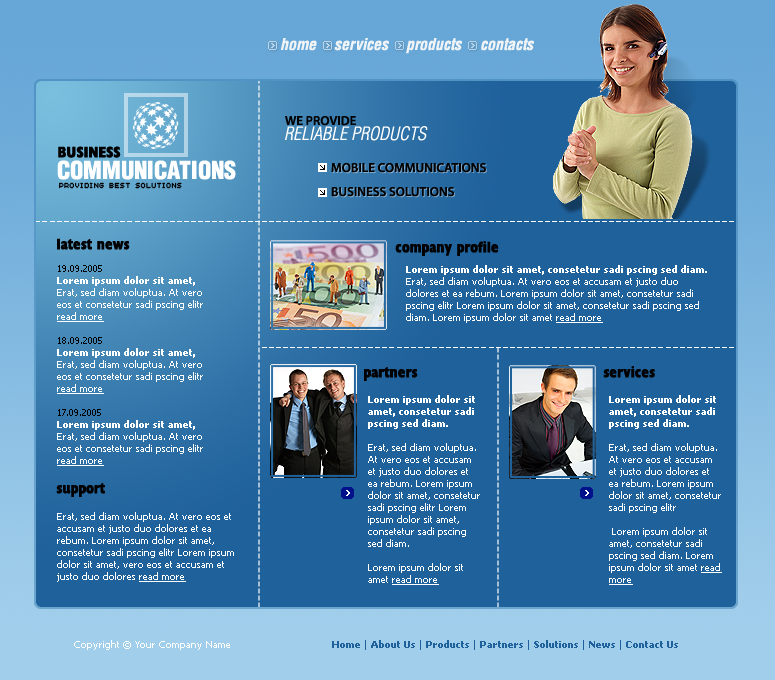
<style>
.page{position:relative;width:775px;height:680px;background:#1f619b}
.page>*{position:absolute;margin:0}
.t1{font:16px "Helvetica-Condensed-BoldObl";color:#f0f4f7}
.t2{font:18px "Helvetica-Condensed-LightObl";color:#ffffff}
.t3{font:13px "MyriadPro-Semibold";color:#000000;text-transform:uppercase}
.t4{font:15.5px "Humanist521BT-XtraBoldCondensed";color:#000000;text-transform:uppercase}
.t5{font:24px "Helvetica-Condensed-Black";color:#ffffff}
.t6{font:13px/24px "MyriadPro-Semibold";color:#000000;text-transform:uppercase}
.t7{font:9.7px "AuXDotBitC";color:#000000;scale:0.83 1}
.t8{font:15.5px "Humanist521BT-XtraBoldCondensed";color:#000000}
.t9{font:10px "Tahoma";color:#ffffff}
.t10{font:10px "Tahoma";color:#000000}
.t11{font:10px "Tahoma-Bold";color:#ffffff}
.t12{font:10px "Tahoma";color:#ffffff;text-decoration:underline}
.t13{font:10px "Tahoma-Bold";color:#1f619b}
.t14{font:10px "Tahoma";color:#1f619b}
</style>
<div class="page">
<p class="t1" style="left:280px;top:38px;width:37px;height:13px">home</p>
<p class="t1" style="left:334px;top:38px;width:55px;height:13px">services</p>
<p class="t1" style="left:406px;top:38px;width:56px;height:16px">products</p>
<p class="t1" style="left:481px;top:38px;width:53px;height:13px">contacts</p>
<p class="t2" style="left:285px;top:126px;width:143px;height:15px">RELIABLE PRODUCTS</p>
<p class="t3" style="left:285px;top:116px;width:71px;height:10px">we provide</p>
<p class="t4" style="left:58px;top:146px;width:63px;height:12px">BUSINESS</p>
<p class="t5" style="left:57px;top:160px;width:179px;height:20px">COMMUNICATIONS</p>
<p class="t6" style="left:331px;top:163px;width:155px;height:34px">mobile communications<br>business solutions</p>
<p class="t7" style="left:59px;top:182px;width:123px;height:7px">PROVIDING BEST SOLUTIONS</p>
<p class="t8" style="left:57px;top:238px;width:73px;height:12px">latest news</p>
<p class="t8" style="left:395px;top:241px;width:104px;height:15px">company profile</p>
<p class="t9" style="left:57px;top:265px;width:146px;height:201px"><span class="t10">19.09.2005<br></span><span class="t11">Lorem ipsum dolor sit amet, <br></span>Erat, sed diam voluptua. At vero eos et consetetur sadi pscing elitr <span class="t12">read more<br></span><span class="t10"><br>18.09.2005<br></span><span class="t11">Lorem ipsum dolor sit amet, <br></span>Erat, sed diam voluptua. At vero eos et consetetur sadi pscing elitr <span class="t12">read more<br><br></span><span class="t10">17.09.2005<br></span><span class="t11">Lorem ipsum dolor sit amet, <br></span>Erat, sed diam voluptua. At vero eos et consetetur sadi pscing elitr <span class="t12">read more</span></p>
<p class="t9" style="left:406px;top:265px;width:301px;height:58px"><span class="t11">Lorem ipsum dolor sit amet, consetetur sadi pscing sed diam. <br></span>Erat, sed diam voluptua. At vero eos et accusam et justo duo dolores et ea rebum. Lorem ipsum dolor sit amet, consetetur sadi pscing elitr Lorem ipsum dolor sit amet, consetetur sadi pscing sed diam. Lorem ipsum dolor sit amet <span class="t12">read more</span></p>
<p class="t8" style="left:603px;top:366px;width:52px;height:12px">services</p>
<p class="t8" style="left:364px;top:367px;width:54px;height:14px">partners</p>
<p class="t9" style="left:368px;top:395px;width:112px;height:190px"><span class="t11">Lorem ipsum dolor sit amet, consetetur sadi pscing sed diam. <br><br></span>Erat, sed diam voluptua. At vero eos et accusam et justo duo dolores et ea rebum. Lorem ipsum dolor sit amet, consetetur sadi pscing elitr Lorem ipsum dolor sit amet, consetetur sadi pscing sed diam. <br><br>Lorem ipsum dolor sit amet <span class="t12">read more</span></p>
<p class="t9" style="left:609px;top:395px;width:113px;height:190px"><span class="t11">Lorem ipsum dolor sit amet, consetetur sadi pscing sed diam. <br><br></span>Erat, sed diam voluptua. At vero eos et accusam et justo duo dolores et ea rebum. Lorem ipsum dolor sit amet, consetetur sadi pscing elitr<br><br> Lorem ipsum dolor sit amet, consetetur sadi pscing sed diam. Lorem ipsum dolor sit amet <span class="t12">read more</span></p>
<p class="t8" style="left:56px;top:483px;width:49px;height:14px">support</p>
<p class="t9" style="left:57px;top:512px;width:177px;height:70px">Erat, sed diam voluptua. At vero eos et accusam et justo duo dolores et ea rebum. Lorem ipsum dolor sit amet, consetetur sadi pscing elitr Lorem ipsum dolor sit amet, vero eos et accusam et justo duo dolores <span class="t12">read more</span></p>
<p class="t9" style="left:74px;top:640px;width:156px;height:10px">Copyright © Your Company Name</p>
<p class="t13" style="left:332px;top:640px;width:346px;height:10px"><span class="t14">  </span>Home<span class="t14"> | </span>About Us <span class="t14">| </span>Products <span class="t14">| </span>Partners <span class="t14">| </span>Solutions <span class="t14">| </span>News<span class="t14"> | </span>Contact Us</p>
</div>
